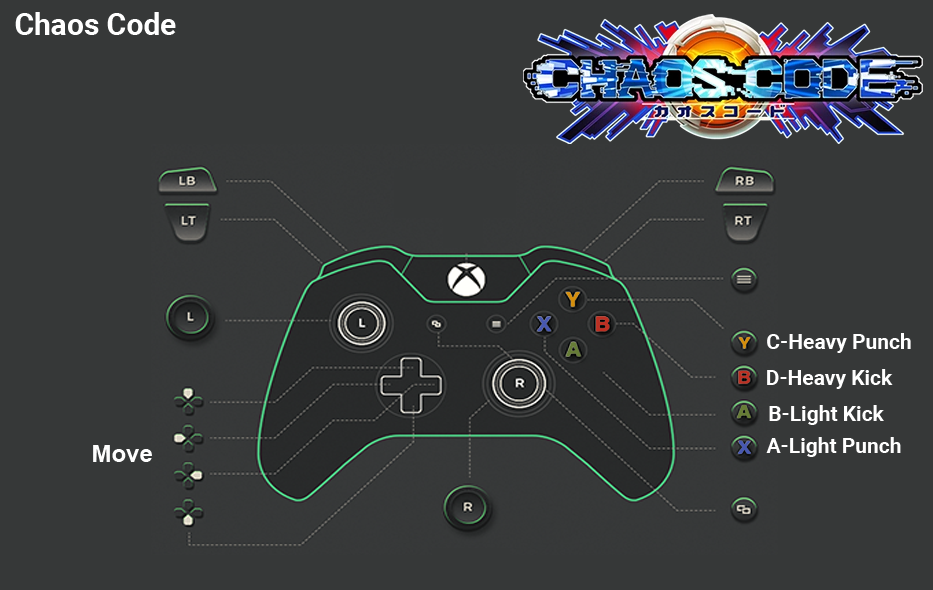
<style>
.page{position:relative;width:933px;height:590px;background:#363838}
.page>*{position:absolute;margin:0}
.t1{font:30px "Roboto-Bold";color:#ffffff}
.t2{font:21px "Roboto-Bold";color:#ffffff}
.t3{font:24px "Arial-BoldMT";color:#fefefe}
</style>
<div class="page">
<p class="t1" style="left:15px;top:12px;width:161px;height:23px">Chaos Code</p>
<p class="t2" style="left:767px;top:333px;width:144px;height:20px">C-Heavy Punch</p>
<p class="t2" style="left:767px;top:369px;width:126px;height:20px">D-Heavy Kick</p>
<p class="t2" style="left:769px;top:405px;width:115px;height:20px">B-Light Kick</p>
<p class="t2" style="left:766px;top:437px;width:135px;height:20px">A-Light Punch</p>
<p class="t3" style="left:93px;top:445px;width:59px;height:17px">Move</p>
</div>
